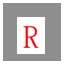
<style>
.page{position:relative;width:64px;height:64px;background:#8e8e8e}
.page>*{position:absolute;margin:0}
.t1{font:30px "MingLiU";color:#ff0000}
</style>
<div class="page">
<p class="t1" style="left:23px;top:26px;width:16px;height:22px">R</p>
</div>
